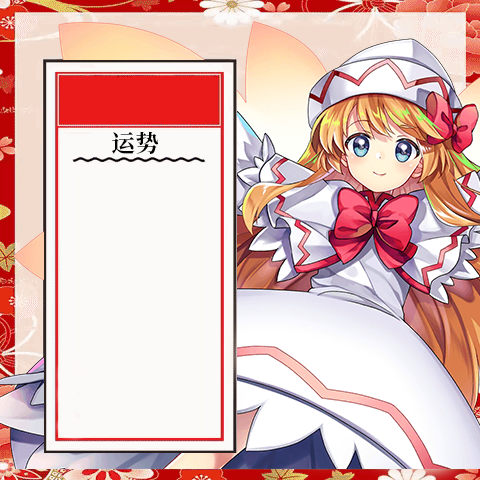
<style>
.page{position:relative;width:480px;height:480px;background:#fcfaf9}
.page>*{position:absolute;margin:0}
.t1{font:24px "NotoSerifSC-Bold";color:#000000}
</style>
<div class="page">
<p class="t1" style="left:112px;top:131px;width:46px;height:23px">运势</p>
</div>
